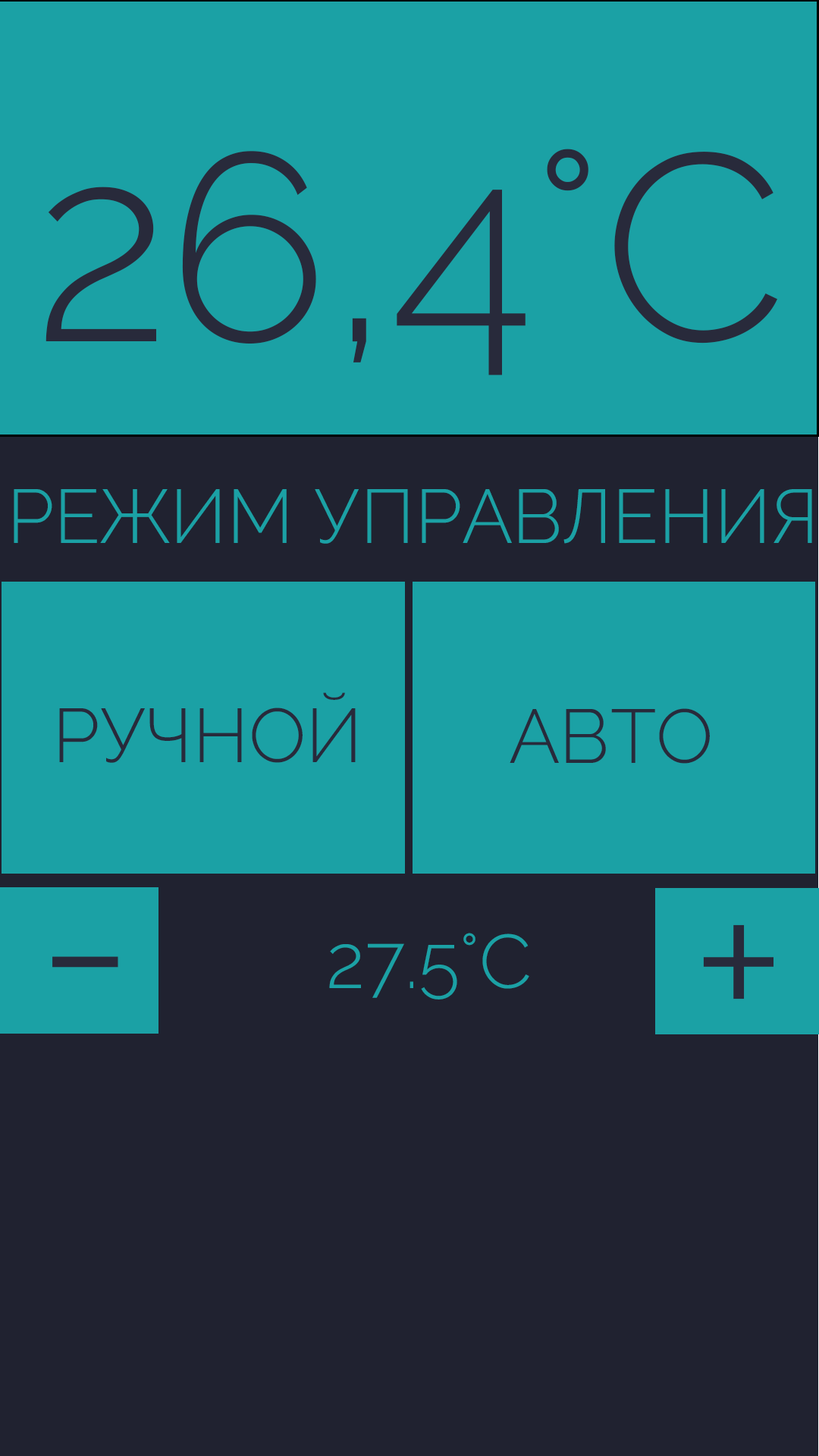
<style>
.page{position:relative;width:819px;height:1456px;background:#1ba1a5}
.page>*{position:absolute;margin:0}
.t1{font:265.4px "Raleway-Light";color:#282a3b}
.t2{font:75.8px "Raleway-Light";color:#1ba1a5}
.t3{font:75.8px "Raleway-Light";color:#282a3b}
.t4{font:227.5px "Raleway-Light";color:#282a3b}
</style>
<div class="page">
<p class="t1" style="left:45px;top:149px;width:732px;height:226px">26,4°С</p>
<p class="t2" style="left:14px;top:489px;width:798px;height:55px">РЕЖИМ УПРАВЛЕНИЯ</p>
<p class="t3" style="left:59px;top:692px;width:297px;height:71px">РУЧНОЙ</p>
<p class="t3" style="left:510px;top:708px;width:200px;height:56px">АВТО</p>
<p class="t4" style="left:703px;top:924px;width:70px;height:75px">+</p>
<p class="t2" style="left:329px;top:933px;width:200px;height:66px">27.5°С</p>
<p class="t4" style="left:52px;top:956px;width:66px;height:12px">-</p>
</div>
